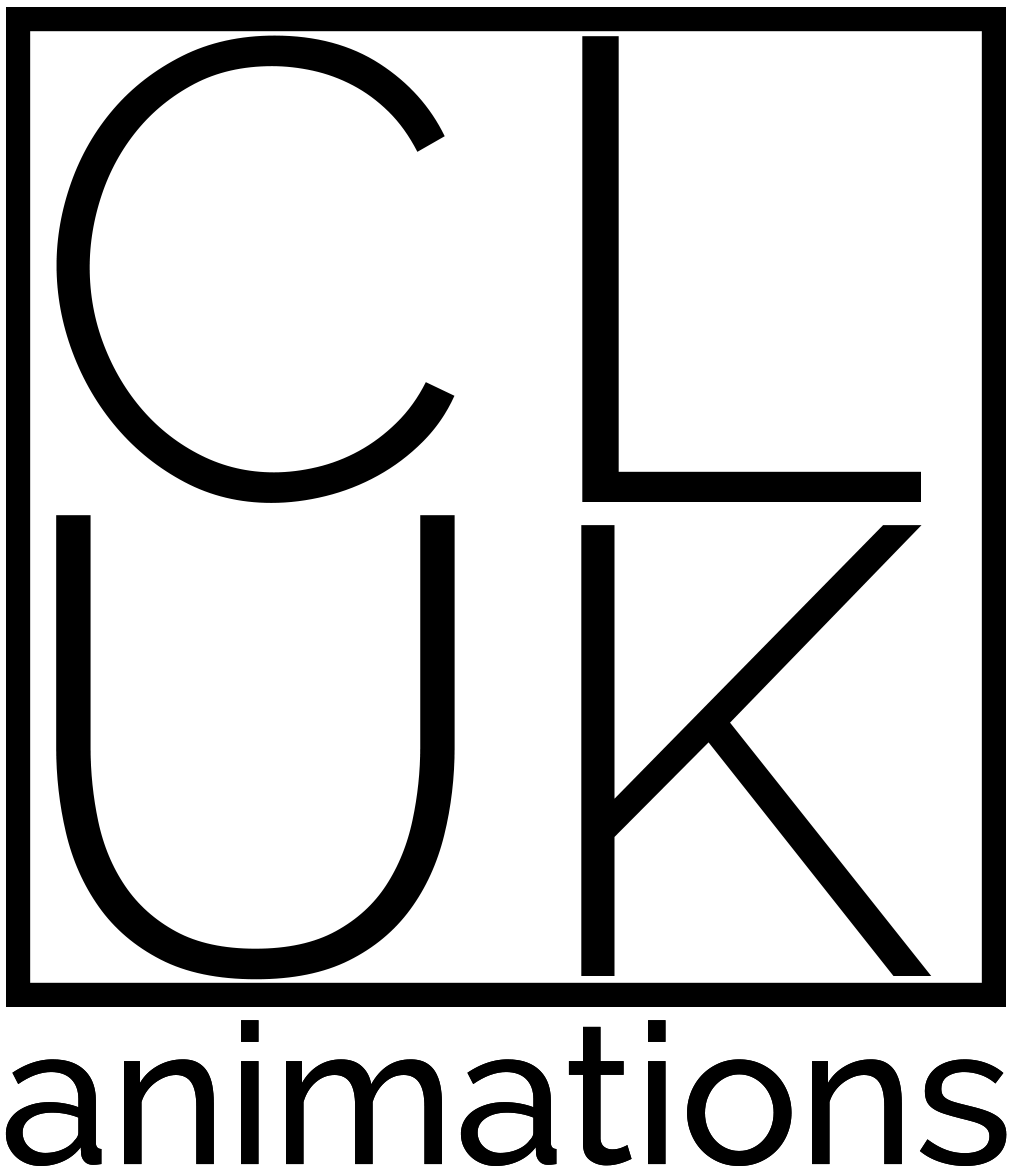
<style>
.page{position:relative;width:1013px;height:1169px;background:#ffffff}
.page>*{position:absolute;margin:0}
.t1{font:649.1px "Raleway-Light";color:#000000}
.t2{font:655.8px "Raleway-Light";color:#000000;scale:1.09 1}
.t3{font:649.3px "Raleway-Light";color:#000000;scale:1.04 1}
.t4{font:635.4px "Raleway-Light";color:#000000}
.t5{font:197.2px "Raleway-Medium";color:#000000}
</style>
<div class="page">
<p class="t1" style="left:56px;top:35px;width:399px;height:468px">C</p>
<p class="t2" style="left:582px;top:36px;width:339px;height:466px">L</p>
<p class="t3" style="left:56px;top:515px;width:399px;height:465px">U</p>
<p class="t4" style="left:581px;top:525px;width:351px;height:451px">K</p>
<p class="t5" style="left:5px;top:1020px;width:1002px;height:146px">animations</p>
<p class="t5" style="left:5px;top:1020px;width:1002px;height:146px">animations</p>
</div>
